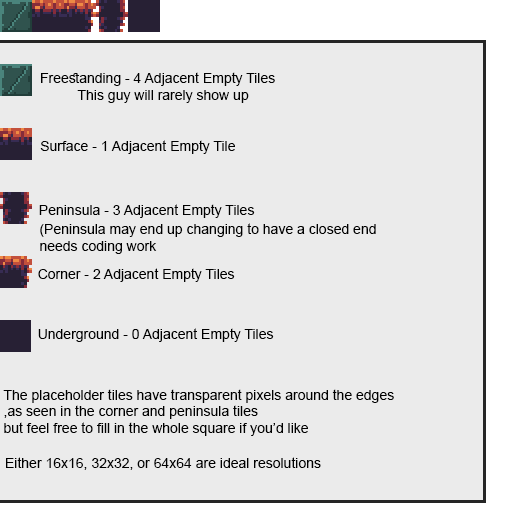
<style>
.page{position:relative;width:512px;height:512px;background:#ebebeb}
.page>*{position:absolute;margin:0}
.t1{font:14px "ArialMT";color:#000000}
</style>
<div class="page">
<p class="t1" style="left:41px;top:72px;width:234px;height:14px">Freestanding - 4 Adjacent Empty Tiles</p>
<p class="t1" style="left:77px;top:90px;width:172px;height:13px">This guy will rarely show up</p>
<p class="t1" style="left:40px;top:140px;width:195px;height:14px">Surface - 1 Adjacent Empty Tile</p>
<p class="t1" style="left:39px;top:204px;width:216px;height:14px">Peninsula - 3 Adjacent Empty Tiles</p>
<p class="t1" style="left:40px;top:223px;width:336px;height:31px;text-align:right">Peninsula may end up changing to have a closed end)<br>needs coding work</p>
<p class="t1" style="left:38px;top:268px;width:197px;height:14px">Corner - 2 Adjacent Empty Tiles</p>
<p class="t1" style="left:38px;top:328px;width:236px;height:14px">Underground - 0 Adjacent Empty Tiles</p>
<p class="t1" style="left:3px;top:389px;width:391px;height:47px;text-align:right">The placeholder tiles have transparent pixels around the edges<br>as seen in the corner and peninsula tiles,<br>but feel free to fill in the whole square if you’d like</p>
<p class="t1" style="left:6px;top:457px;width:315px;height:13px">Either 16x16, 32x32, or 64x64 are ideal resolutions</p>
</div>
